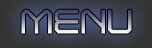
<style>
.page{position:relative;width:152px;height:48px}
.page>*{position:absolute;margin:0}
.t1{font:33.3px "Astrolyte"}
</style>
<div class="page">
<p class="t1" style="left:21px;top:9px;width:111px;height:25px">MENU</p>
</div>
